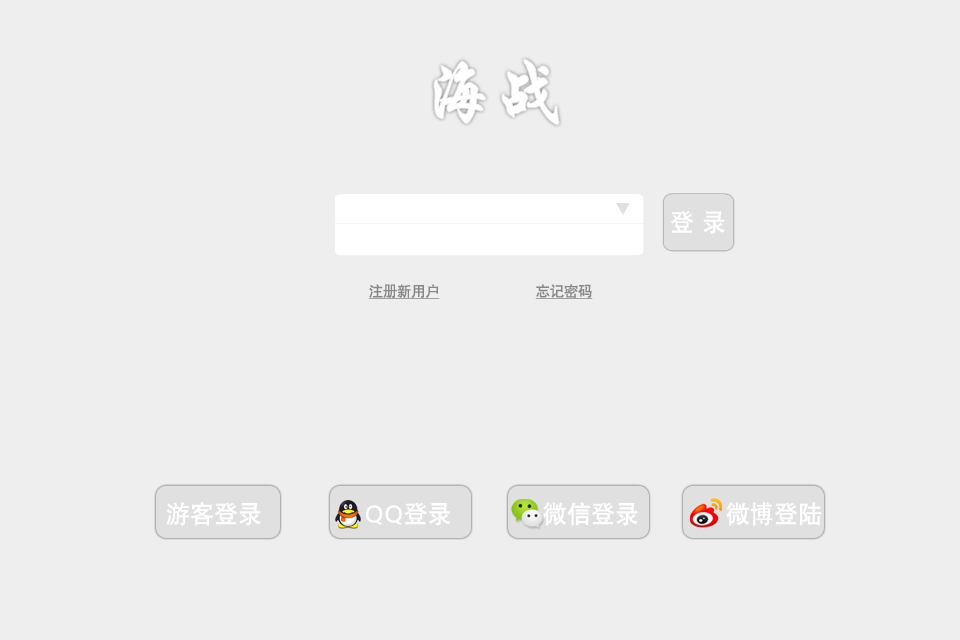
<style>
.page{position:relative;width:960px;height:640px;background:#eeeeee}
.page>*{position:absolute;margin:0}
.t1{font:72px "STXingkai-SC-Bold";letter-spacing:0.005em;color:#ffffff}
.t2{font:24px "SIL-Hei-Med-Jian";letter-spacing:0.005em;color:#ffffff}
.t3{font:14px "SIL-Hei-Med-Jian";letter-spacing:0.005em;color:#888888;text-decoration:underline}
</style>
<div class="page">
<p class="t1" style="left:434px;top:59px;width:125px;height:66px">海战</p>
<p class="t2" style="left:670px;top:211px;width:55px;height:23px">登 录</p>
<p class="t3" style="left:368px;top:284px;width:72px;height:15px">注册新用户</p>
<p class="t3" style="left:535px;top:284px;width:58px;height:15px">忘记密码</p>
<p class="t2" style="left:166px;top:502px;width:95px;height:24px">游客登录</p>
<p class="t2" style="left:366px;top:502px;width:85px;height:24px">QQ登录</p>
<p class="t2" style="left:543px;top:502px;width:95px;height:24px">微信登录</p>
<p class="t2" style="left:726px;top:502px;width:96px;height:24px">微博登陆</p>
</div>
